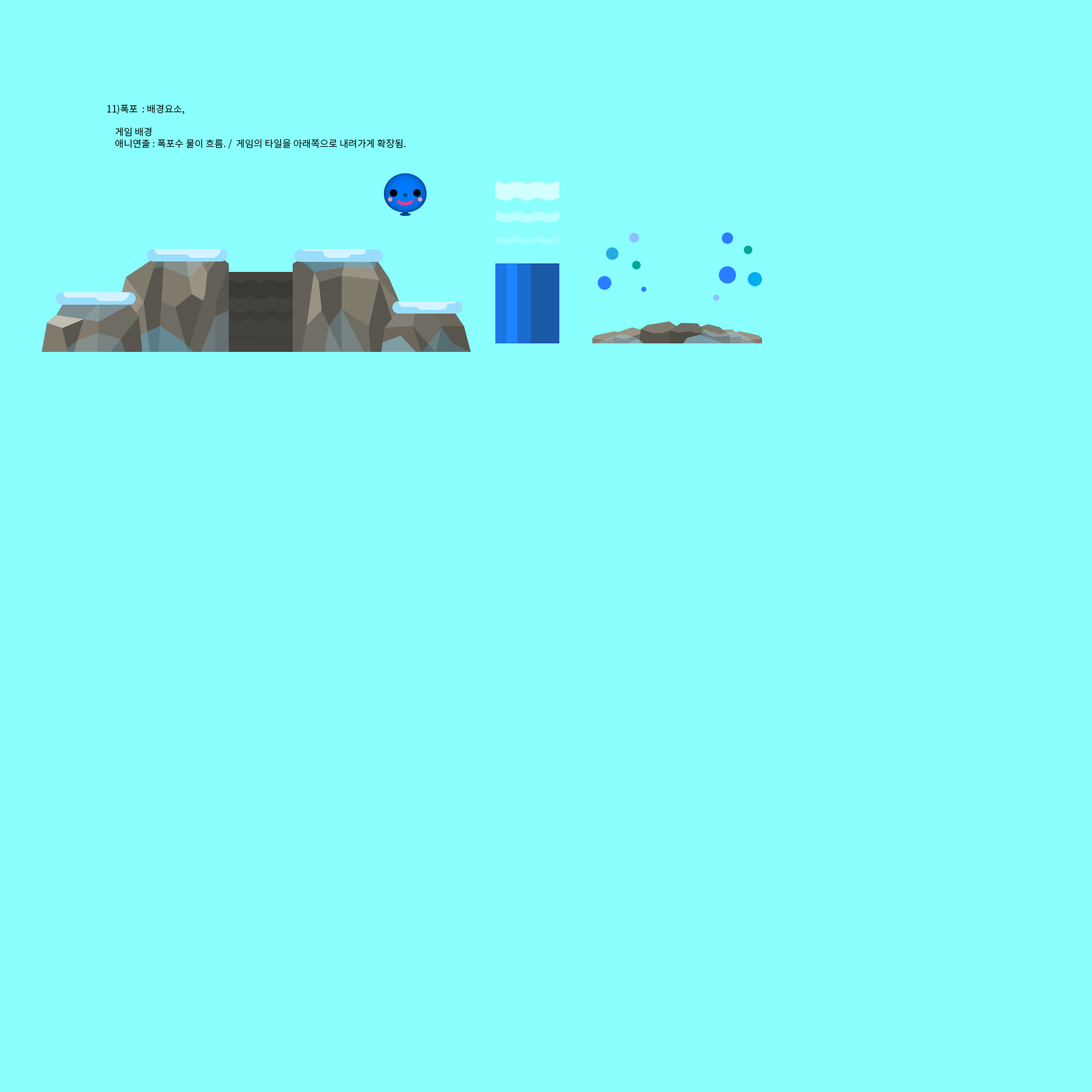
<style>
.page{position:relative;width:1092px;height:1092px;background:#8afffd}
.page>*{position:absolute;margin:0}
.t1{font:9.6px "NotoSansCJKkr-DemiLight";color:#000000}
</style>
<div class="page">
<p class="t1" style="left:107px;top:104px;width:299px;height:45px">11)폭포  : 배경요소,   <br>    <br>    게임 배경<br>    애니연출 : 폭포수 물이 흐름. /  게임의 타일을 아래쪽으로 내려가게 확장됨.</p>
</div>
